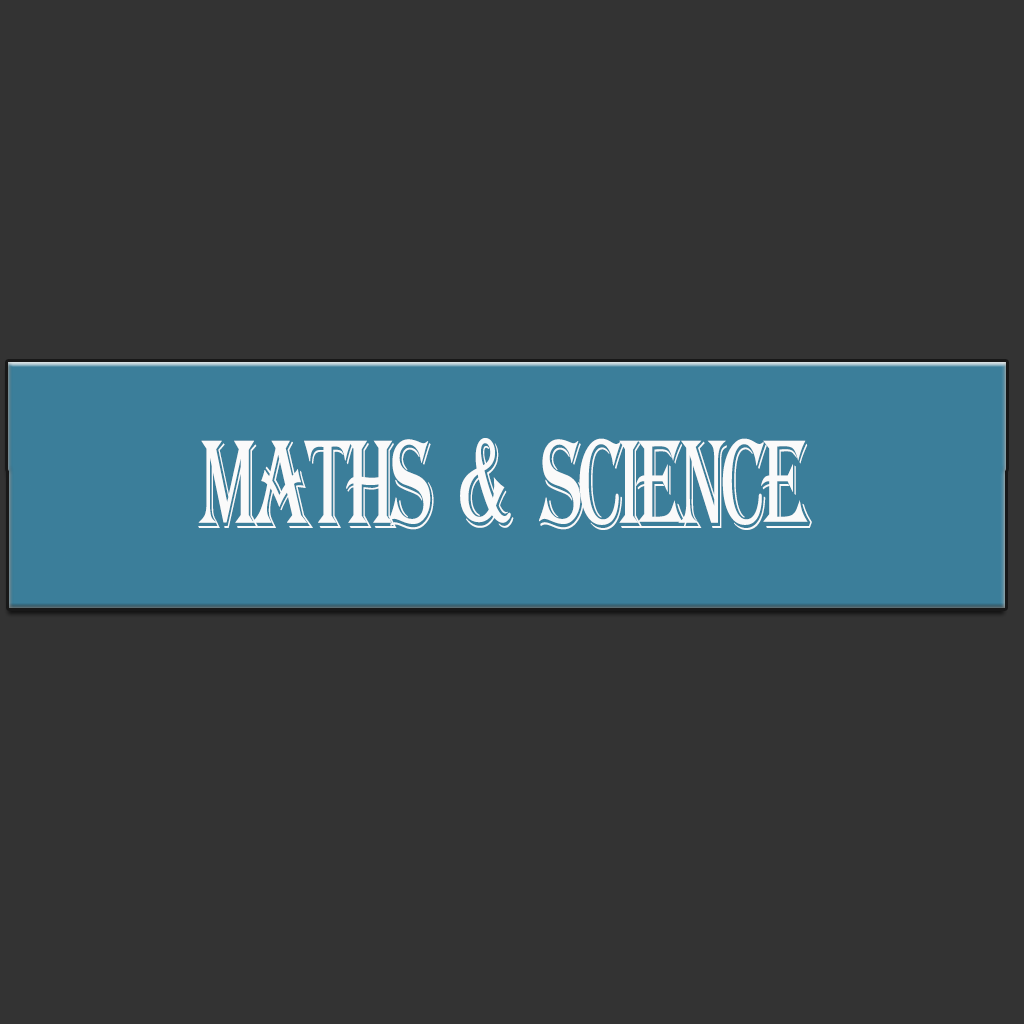
<style>
.page{position:relative;width:1024px;height:1024px;background:#333333}
.page>*{position:absolute;margin:0}
.t1{font:130.4px "Algerian";letter-spacing:-0.08em;color:#fafafa;scale:0.61 1}
</style>
<div class="page">
<p class="t1" style="left:198px;top:438px;width:614px;height:92px">Maths  &amp;  Science</p>
</div>
